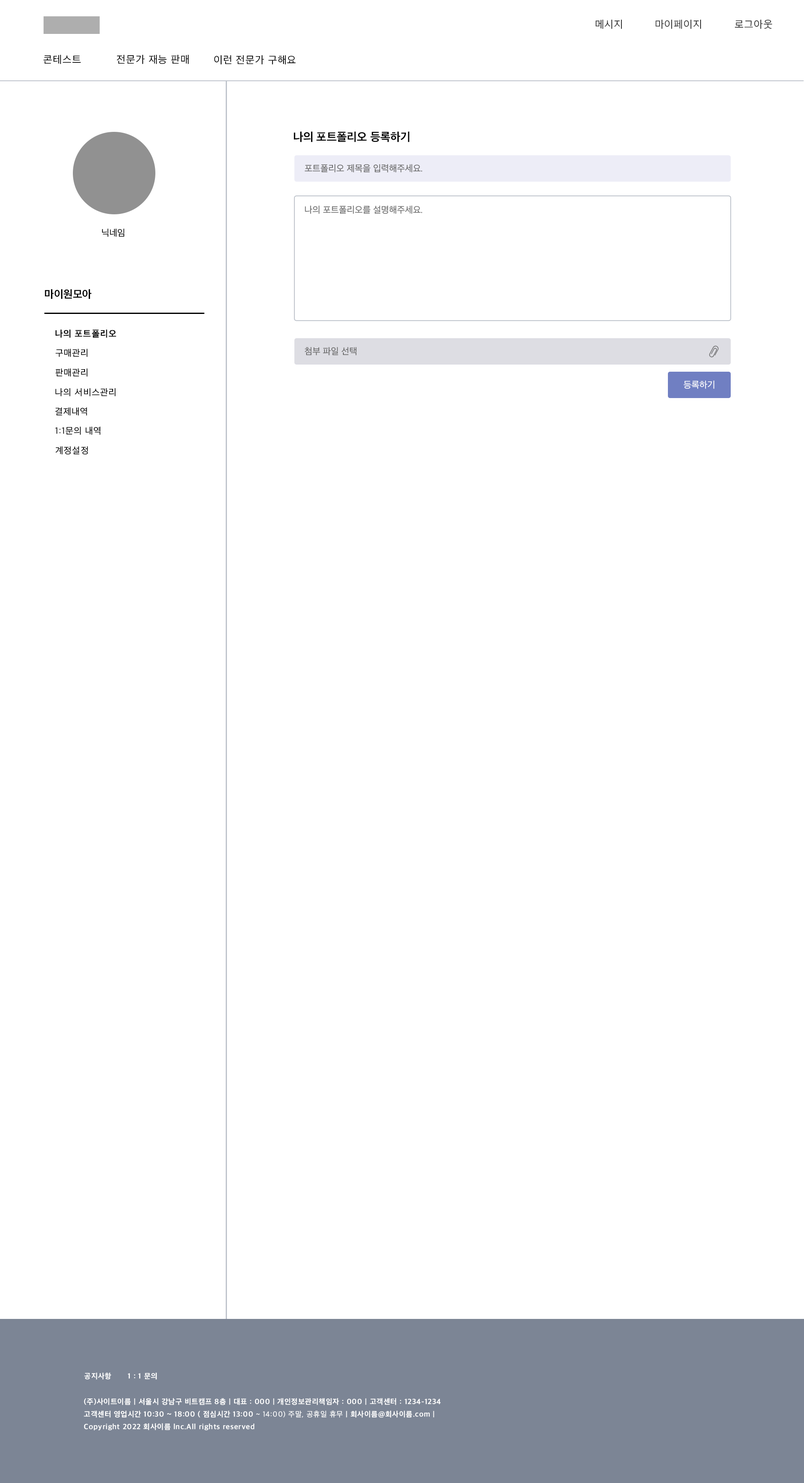
<style>
.page{position:relative;width:804px;height:1483px;background:#ffffff}
.page>*{position:absolute;margin:0}
.t1{font:10.5px "AppleSDGothicNeo-Regular";letter-spacing:0.05em;color:#333333}
.t2{font:10.5px "AppleSDGothicNeo-Regular";letter-spacing:0.05em;color:#000000}
.t3{font:11.7px "AppleSDGothicNeo-Bold";color:#000000}
.t4{font:9.2px "AppleSDGothicNeo-Regular";color:#696969}
.t5{font:9.2px "AppleSDGothicNeo-Regular";color:#000000}
.t6{font:10.9px "AppleSDGothicNeo-Bold";color:#000000}
.t7{font:9.2px "AppleSDGothicNeo-Bold";letter-spacing:0.05em;color:#000000}
.t8{font:9.2px "AppleSDGothicNeo-Regular";letter-spacing:0.05em;color:#000000}
.t9{font:9.2px "AppleSDGothicNeo-Regular";color:#ffffff}
.t10{font:7.5px "AppleSDGothicNeo-ExtraBold";letter-spacing:0.05em;color:#ffffff}
.t11{font:7.5px/12.6px "AppleSDGothicNeo-Bold";letter-spacing:0.05em;color:#ffffff}
.t12{font:7.5px/12.6px "AppleSDGothicNeo-Regular";letter-spacing:0.05em;color:#ffffff}
</style>
<div class="page">
<p class="t1" style="left:595px;top:20px;width:27px;height:9px">메시지</p>
<p class="t1" style="left:655px;top:20px;width:46px;height:9px">마이페이지</p>
<p class="t1" style="left:735px;top:20px;width:37px;height:9px">로그아웃</p>
<p class="t2" style="left:44px;top:55px;width:37px;height:9px">콘테스트</p>
<p class="t2" style="left:117px;top:55px;width:72px;height:9px">전문가 재능 판매</p>
<p class="t2" style="left:214px;top:55px;width:82px;height:9px">이런 전문가 구해요</p>
<p class="t3" style="left:293px;top:131px;width:116px;height:11px">나의 포트폴리오 등록하기</p>
<p class="t4" style="left:304px;top:164px;width:118px;height:8px">포트폴리오 제목을 입력해주세요.</p>
<p class="t4" style="left:305px;top:206px;width:117px;height:8px">나의 포트폴리오를 설명해주세요.</p>
<p class="t5" style="left:102px;top:229px;width:22px;height:8px">닉네임</p>
<p class="t6" style="left:45px;top:289px;width:47px;height:10px">마이원모아</p>
<p class="t7" style="left:55px;top:330px;width:61px;height:8px">나의 포트폴리오</p>
<p class="t8" style="left:55px;top:349px;width:33px;height:8px">구매관리</p>
<p class="t4" style="left:304px;top:347px;width:53px;height:8px">첨부 파일 선택</p>
<p class="t8" style="left:55px;top:368px;width:33px;height:9px">판매관리</p>
<p class="t8" style="left:55px;top:388px;width:61px;height:8px">나의 서비스관리</p>
<p class="t9" style="left:683px;top:381px;width:31px;height:8px">등록하기</p>
<p class="t8" style="left:55px;top:407px;width:32px;height:9px">결제내역</p>
<p class="t8" style="left:55px;top:427px;width:45px;height:8px">1:1문의 내역</p>
<p class="t8" style="left:55px;top:446px;width:33px;height:9px">계정설정</p>
<p class="t10" style="left:84px;top:1373px;width:27px;height:7px">공지사항</p>
<p class="t10" style="left:128px;top:1373px;width:29px;height:7px">1 : 1 문의</p>
<p class="t11" style="left:84px;top:1398px;width:357px;height:33px">(주)사이트이름 | 서울시 강남구 비트캠프 8층 | 대표 : 000 | 개인정보관리책임자 : 000 | 고객센터 : 1234-1234<br>고객센터 영업시간 10:30 ~ 18:00 ( 점심시간 13:00<span class="t12"> ~ 14:00) 주말, 공휴일 휴무</span> | 회사이름@회사이름.com | <br>Copyright 2022 회사이름 lnc.All rights reserved</p>
</div>
